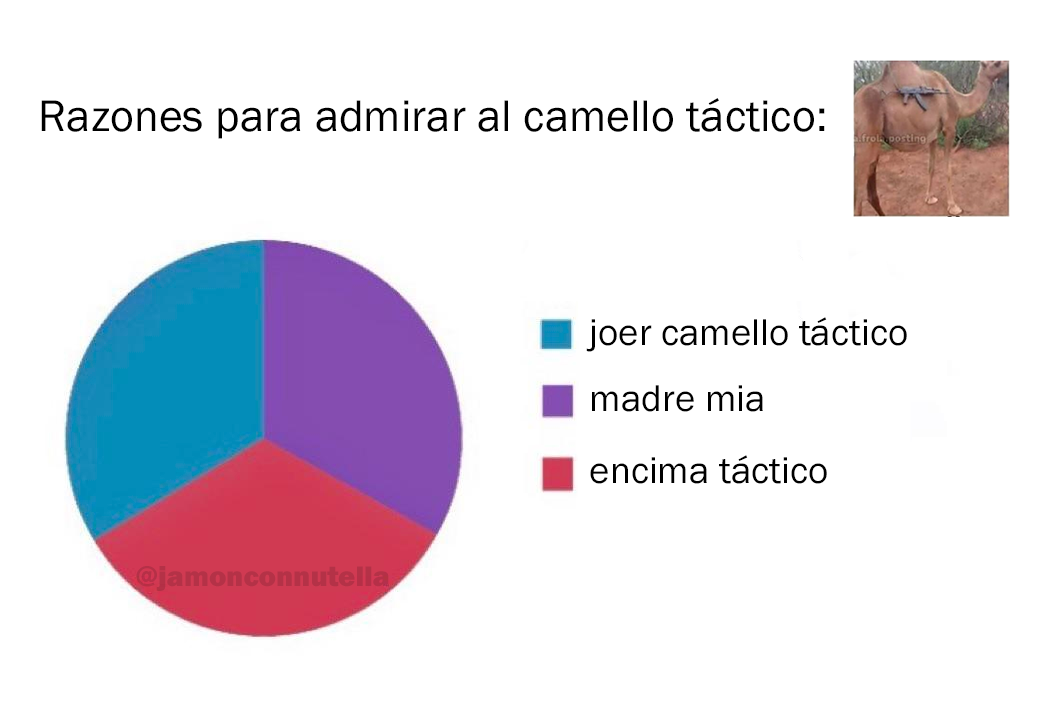
<style>
.page{position:relative;width:1052px;height:701px;background:#ffffff}
.page>*{position:absolute;margin:0}
.t1{font:45.8px "FranklinGothic-Book";color:#000000}
.t2{font:38.7px "FranklinGothic-Book";color:#000000}
.t3{font:29.2px "FranklinGothic-Heavy";color:#b43247}
</style>
<div class="page">
<p class="t1" style="left:41px;top:98px;width:784px;height:41px">Razones para admirar al camello táctico:</p>
<p class="t2" style="left:586px;top:317px;width:321px;height:35px">joer camello táctico</p>
<p class="t2" style="left:592px;top:385px;width:171px;height:27px">madre mia</p>
<p class="t2" style="left:590px;top:455px;width:237px;height:29px">encima táctico</p>
<p class="t3" style="left:136px;top:566px;width:253px;height:25px">@jamonconnutella</p>
</div>
